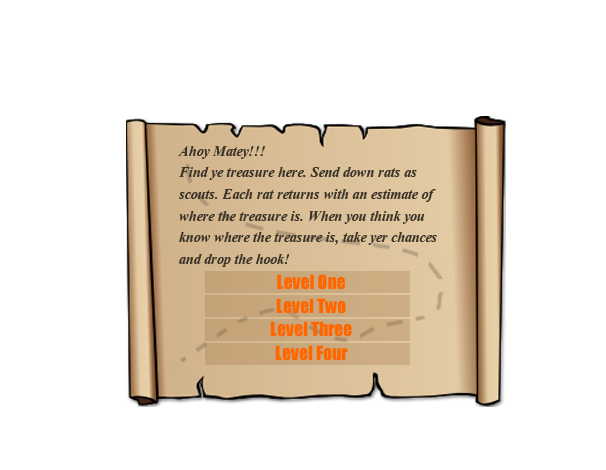
<style>
.page{position:relative;width:606px;height:470px;background:#ffffff}
.page>*{position:absolute;margin:0}
.t1{font:18px "Vijaya-Bold";letter-spacing:-0.01em;color:#3a3328}
.t2{font:18px "Impact";color:#ff6600}
</style>
<div class="page">
<p class="t1" style="left:178px;top:146px;width:259px;height:121px">Ahoy Matey!!! <br>Find ye treasure here. Send down rats as scouts. Each rat returns with an estimate of where the treasure is. When you think you know where the treasure is, take yer chances and drop the hook!</p>
<p class="t2" style="left:277px;top:274px;width:68px;height:16px">Level One</p>
<p class="t2" style="left:276px;top:298px;width:70px;height:16px">Level Two</p>
<p class="t2" style="left:270px;top:321px;width:82px;height:16px">Level Three</p>
<p class="t2" style="left:275px;top:345px;width:73px;height:16px">Level Four</p>
</div>
